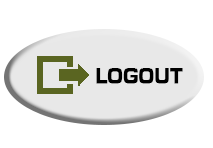
<style>
.page{position:relative;width:213px;height:148px;background:#ffffff}
.page>*{position:absolute;margin:0}
.t1{font:23px "EurostileBold";color:#000000;text-transform:uppercase;font-weight:bold}
</style>
<div class="page">
<p class="t1" style="left:96px;top:68px;width:87px;height:16px">Logout</p>
</div>
